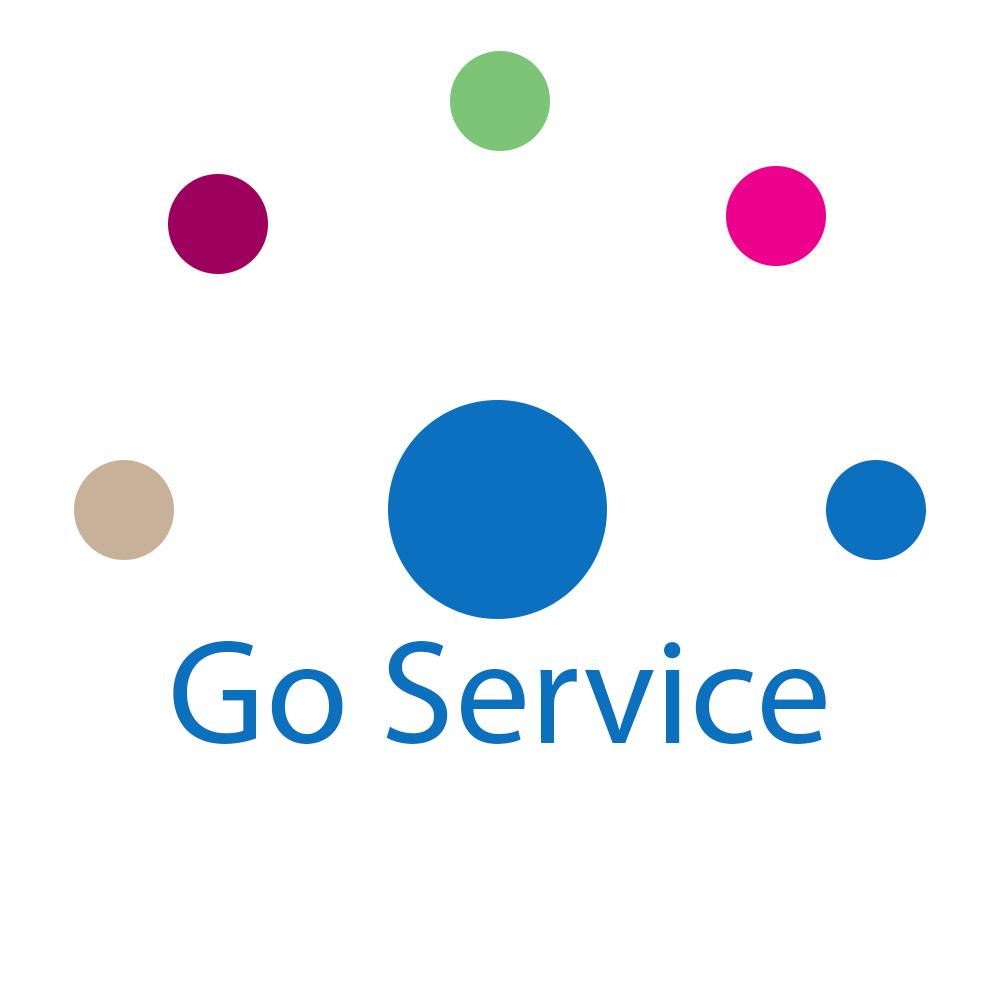
<style>
.page{position:relative;width:1000px;height:1000px;background:#ffffff}
.page>*{position:absolute;margin:0}
.t1{font:150px "MyriadPro-Regular";color:#0b70be}
</style>
<div class="page">
<p class="t1" style="left:173px;top:640px;width:653px;height:105px">Go Service</p>
</div>
